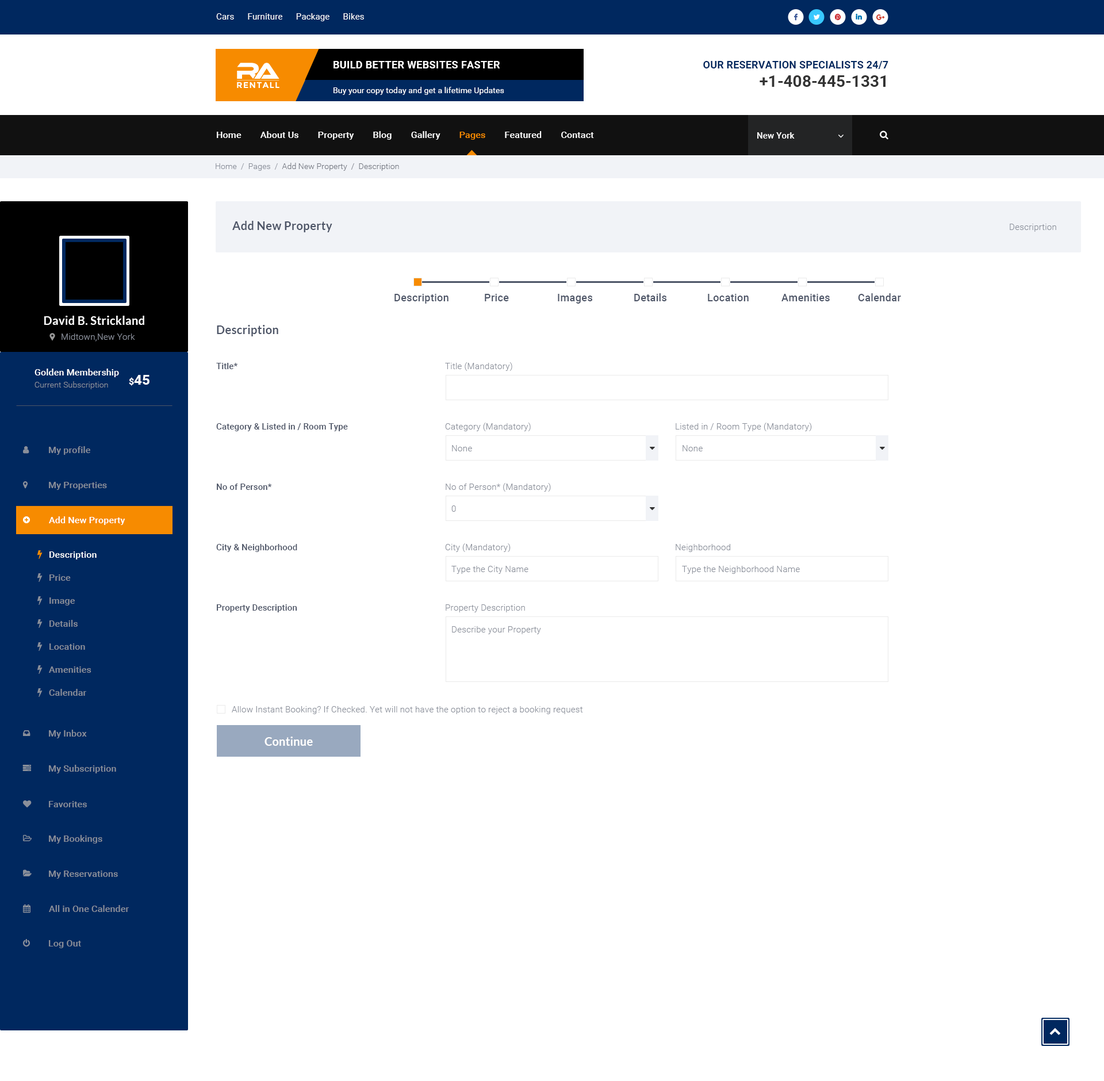
<style>
.page{position:relative;width:1104px;height:1081px;background:#ffffff}
.page>*{position:absolute;margin:0}
.t1{font:8.6px "Roboto-Regular";letter-spacing:0.01em;color:#ffffff}
.t2{font:10.3px "Roboto-Bold";letter-spacing:0.02em;color:#ffffff;text-transform:uppercase}
.t3{font:10.3px "Roboto-Bold";letter-spacing:0.01em;color:#00285f;text-transform:uppercase}
.t4{font:16.1px "Roboto-Bold";color:#333333}
.t5{font:8.4px "Montserrat-Bold";letter-spacing:0.08em;color:#ffffff;text-transform:uppercase}
.t6{font:8px "Roboto-Regular";letter-spacing:0.01em;color:#ffffff}
.t7{font:9.2px "Roboto-Medium";letter-spacing:0.01em;color:#ffffff}
.t8{font:9.2px "Roboto-Medium";letter-spacing:0.01em;color:#f78b00}
.t9{font:8.6px "Roboto-Medium";letter-spacing:0.01em;color:#ffffff}
.t10{font:8px "Roboto-Light";letter-spacing:0.01em;color:#757983}
.t11{font:8px "Roboto-Light";letter-spacing:0.01em;color:#8a8f9a}
.t12{font:11.5px "Lato-Bold";letter-spacing:0.01em;color:#4d5567}
.t13{font:8.6px "Roboto-Light";letter-spacing:0.01em;color:#8a8f9a}
.t14{font:10.3px "Roboto-Medium";letter-spacing:0.01em;color:#4d5567}
.t15{font:11.5px "Lato-Bold";letter-spacing:0.01em;color:#ffffff}
.t16{font:8.6px "Roboto-Medium";letter-spacing:0.01em;color:#4d5567}
.t17{font:13.8px "Roboto-Bold";letter-spacing:0.01em;color:#ffffff}
.t18{font:9.2px "Roboto-Bold";letter-spacing:0.01em;color:#ffffff}
.t19{font:9.2px "Roboto-Medium";letter-spacing:0.01em;color:#8a8f9a}
.t20{font:9.2px/23px "Roboto-Medium";letter-spacing:0.01em;color:#8a8f9a}
.t21{font:9.2px/23px "Roboto-Medium";letter-spacing:0.01em;color:#ffffff}
</style>
<div class="page">
<p class="t1" style="left:216px;top:13px;width:148px;height:8px">Cars      Furniture      Package      Bikes</p>
<p class="t2" style="left:333px;top:61px;width:167px;height:7px">Build better Websites Faster</p>
<p class="t3" style="left:703px;top:61px;width:185px;height:8px">Our Reservation Specialists 24/7</p>
<p class="t4" style="left:759px;top:75px;width:126px;height:12px">+1-408-445-1331</p>
<p class="t5" style="left:237px;top:82px;width:42px;height:6px">RentAll</p>
<p class="t6" style="left:333px;top:87px;width:171px;height:8px">Buy your copy today and get a lifetime Updates</p>
<p class="t7" style="left:217px;top:131px;width:377px;height:9px">Home        About Us        Property        Blog        Gallery        <span class="t8">Pages</span>        Featured        Contact</p>
<p class="t9" style="left:757px;top:132px;width:37px;height:7px">New York</p>
<p class="t10" style="left:216px;top:163px;width:183px;height:8px"><span class="t11">Home  /  Pages  /  </span>Add New Property  /  Description</p>
<p class="t12" style="left:232px;top:221px;width:100px;height:11px">Add New Property</p>
<p class="t13" style="left:1009px;top:224px;width:47px;height:8px">Descriprtion</p>
<p class="t14" style="left:394px;top:294px;width:54px;height:9px">Description</p>
<p class="t14" style="left:485px;top:294px;width:24px;height:7px">Price</p>
<p class="t14" style="left:558px;top:294px;width:34px;height:9px">Images</p>
<p class="t14" style="left:634px;top:293px;width:32px;height:8px">Details</p>
<p class="t14" style="left:708px;top:294px;width:40px;height:7px">Location</p>
<p class="t14" style="left:781px;top:294px;width:48px;height:7px">Amenities</p>
<p class="t14" style="left:858px;top:293px;width:43px;height:8px">Calendar</p>
<p class="t15" style="left:44px;top:316px;width:100px;height:9px">David B. Strickland</p>
<p class="t12" style="left:217px;top:325px;width:61px;height:11px">Description</p>
<p class="t13" style="left:61px;top:333px;width:74px;height:8px">Midtown,New York</p>
<p class="t16" style="left:216px;top:363px;width:21px;height:6px">Title*</p>
<p class="t13" style="left:445px;top:362px;width:67px;height:9px">Title (Mandatory)</p>
<p class="t7" style="left:34px;top:368px;width:85px;height:9px">Golden Membership</p>
<p class="t17" style="left:129px;top:375px;width:20px;height:11px"><span class="t18">$</span>45</p>
<p class="t11" style="left:34px;top:381px;width:74px;height:8px">Current Subscription</p>
<p class="t16" style="left:216px;top:423px;width:132px;height:8px">Category &amp; Listed in / Room Type</p>
<p class="t13" style="left:445px;top:422px;width:86px;height:9px">Category (Mandatory)</p>
<p class="t13" style="left:675px;top:422px;width:137px;height:9px">Listed in / Room Type (Mandatory)</p>
<p class="t19" style="left:49px;top:446px;width:41px;height:9px">My profile</p>
<p class="t13" style="left:452px;top:445px;width:20px;height:6px">None</p>
<p class="t13" style="left:682px;top:445px;width:20px;height:6px">None</p>
<p class="t19" style="left:49px;top:482px;width:58px;height:8px">My Properties</p>
<p class="t16" style="left:217px;top:483px;width:55px;height:7px">No of Person*</p>
<p class="t13" style="left:445px;top:483px;width:106px;height:8px">No of Person* (Mandatory)</p>
<p class="t13" style="left:451px;top:505px;width:5px;height:7px">0</p>
<p class="t7" style="left:49px;top:516px;width:76px;height:9px">Add New Property</p>
<p class="t16" style="left:216px;top:544px;width:81px;height:8px">City &amp; Neighborhood</p>
<p class="t13" style="left:445px;top:543px;width:65px;height:9px">City (Mandatory)</p>
<p class="t13" style="left:675px;top:544px;width:55px;height:8px">Neighborhood</p>
<p class="t20" style="left:49px;top:551px;width:48px;height:144px"><span class="t21">Description<br></span>Price<br>Image<br>Details<br>Location<br>Amenities<br>Calendar</p>
<p class="t13" style="left:451px;top:566px;width:77px;height:8px">Type the City Name</p>
<p class="t13" style="left:682px;top:566px;width:117px;height:8px">Type the Neighborhood Name</p>
<p class="t16" style="left:217px;top:604px;width:80px;height:8px">Property Description</p>
<p class="t13" style="left:445px;top:604px;width:80px;height:8px">Property Description</p>
<p class="t13" style="left:452px;top:626px;width:89px;height:8px">Describe your Property</p>
<p class="t13" style="left:232px;top:706px;width:351px;height:8px">Allow Instant Booking? If Checked. Yet will not have the option to reject a booking request</p>
<p class="t19" style="left:49px;top:729px;width:38px;height:9px">My Inbox</p>
<p class="t15" style="left:264px;top:736px;width:49px;height:9px">Continue</p>
<p class="t19" style="left:49px;top:764px;width:67px;height:9px">My Subscription</p>
<p class="t19" style="left:49px;top:801px;width:38px;height:6px">Favorites</p>
<p class="t19" style="left:49px;top:835px;width:53px;height:8px">My Bookings</p>
<p class="t19" style="left:49px;top:870px;width:69px;height:8px">My Reservations</p>
<p class="t19" style="left:49px;top:905px;width:80px;height:7px">All in One Calender</p>
<p class="t19" style="left:49px;top:940px;width:32px;height:8px">Log Out</p>
</div>
